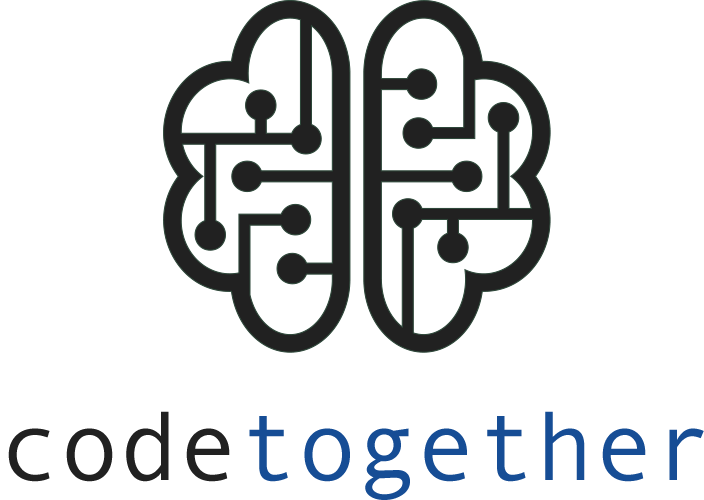
<style>
.page{position:relative;width:704px;height:500px;background:#ffffff}
.page>*{position:absolute;margin:0}
.t1{font:99px "AndaleMono";color:#164d95}
.t2{font:99px "AndaleMono";color:#212121}
</style>
<div class="page">
<p class="t1" style="left:8px;top:411px;width:696px;height:89px"><span class="t2">code</span>together</p>
</div>
